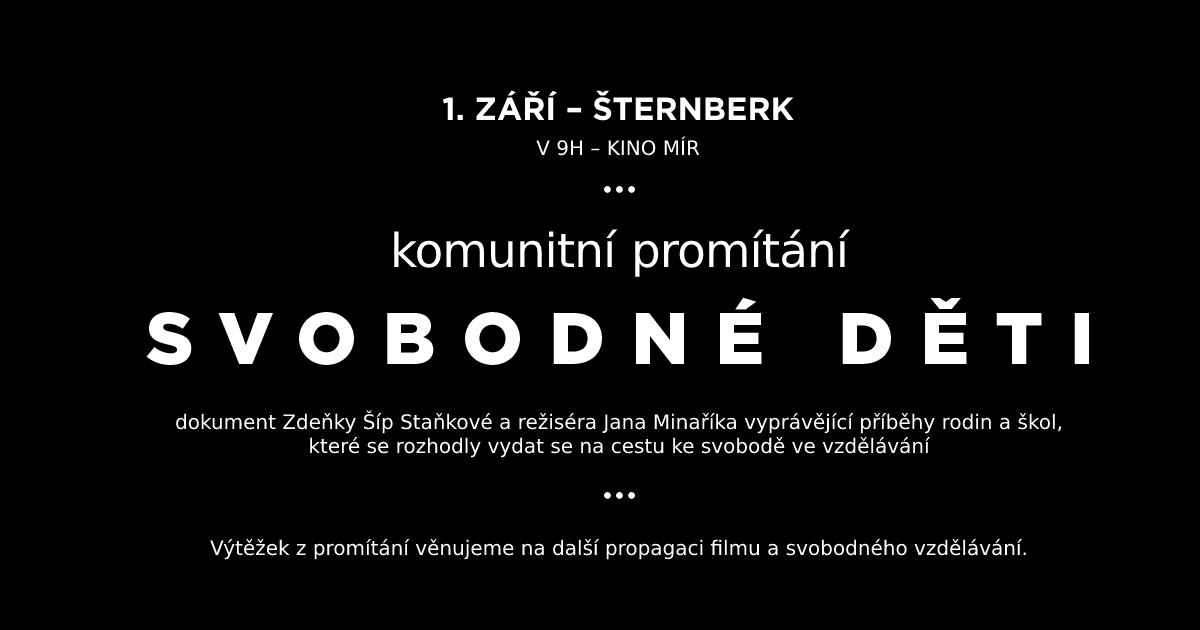
<style>
.page{position:relative;width:1200px;height:630px;background:#000000}
.page>*{position:absolute;margin:0}
.t1{font:32px "Gotham-Bold";color:#ffffff}
.t2{font:20px "Gotham-Book";color:#ffffff}
.t3{font:25.4px "Gotham-Book";color:#ffffff}
.t4{font:46.9px "Gotham-Book";color:#ffffff}
.t5{font:73px "Gotham-Black";letter-spacing:0.36em;color:#ffffff}
.t6{font:20px "Gotham-Medium";color:#ffffff}
.t7{font:20px "Gotham-Medium";color:#fffefe}
</style>
<div class="page">
<p class="t1" style="left:442px;top:90px;width:352px;height:31px">1. ZÁŘÍ – ŠTERNBERK</p>
<p class="t2" style="left:536px;top:136px;width:164px;height:20px">V 9H – KINO MÍR</p>
<p class="t3" style="left:604px;top:186px;width:31px;height:7px">•••</p>
<p class="t4" style="left:394px;top:229px;width:457px;height:48px">komunitní promítání</p>
<p class="t5" style="left:146px;top:297px;width:943px;height:68px">SVOBODNÉ DĚTI</p>
<p class="t6" style="left:176px;top:410px;width:885px;height:48px;text-align:center">dokument Zdeňky Šíp Staňkové a režiséra Jana Minaříka vyprávějící příběhy rodin a škol,<br>které se rozhodly vydat se na cestu ke svobodě ve vzdělávání</p>
<p class="t3" style="left:604px;top:492px;width:31px;height:7px">•••</p>
<p class="t7" style="left:210px;top:539px;width:816px;height:21px">Výtěžek z promítání věnujeme na další propagaci filmu a svobodného vzdělávání.</p>
</div>
